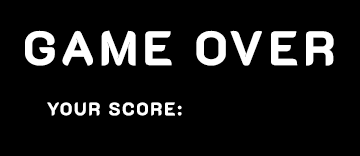
<style>
.page{position:relative;width:360px;height:156px;background:#000000}
.page>*{position:absolute;margin:0}
.t1{font:48px "K2D-ExtraBold";letter-spacing:0.1em;color:#ffffff;text-transform:uppercase}
.t2{font:18px "K2D-ExtraBold";letter-spacing:0.1em;color:#ffffff;text-transform:uppercase}
</style>
<div class="page">
<p class="t1" style="left:25px;top:30px;width:309px;height:36px">game over</p>
<p class="t2" style="left:47px;top:102px;width:135px;height:14px">your score:</p>
</div>
